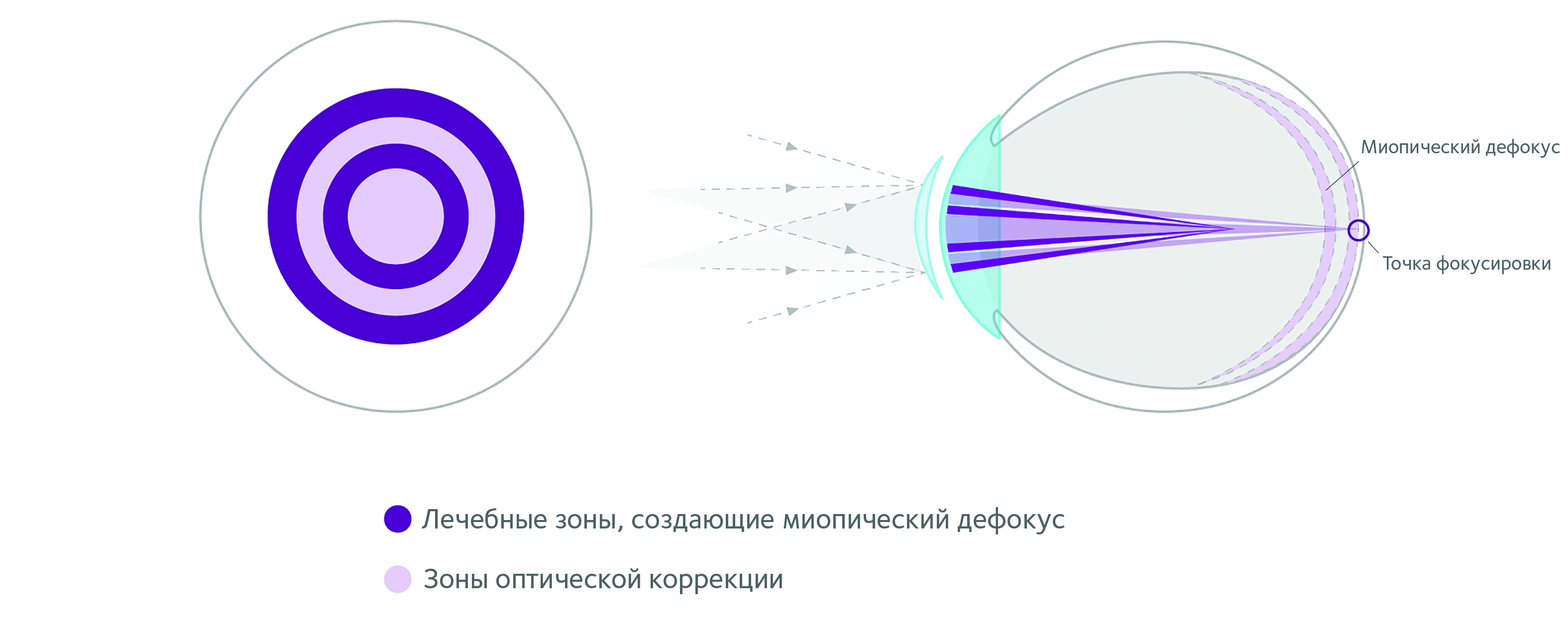
<style>
.page{position:relative;width:1568px;height:630px;background:#ffffff}
.page>*{position:absolute;margin:0}
.t1{font:19.9px "FoundrySterlingOT3-Medium";color:#4b6163}
.t2{font:28.9px "FoundrySterlingOT3-Medium";color:#4b6163}
</style>
<div class="page">
<p class="t1" style="left:1361px;top:139px;width:199px;height:19px">Миопический дефокус</p>
<p class="t1" style="left:1383px;top:255px;width:168px;height:19px">Точка фокусировки</p>
<p class="t2" style="left:422px;top:507px;width:643px;height:28px">Лечебные зоны, создающие миопический дефокус</p>
<p class="t2" style="left:424px;top:568px;width:358px;height:26px">Зоны оптической коррекции</p>
</div>
